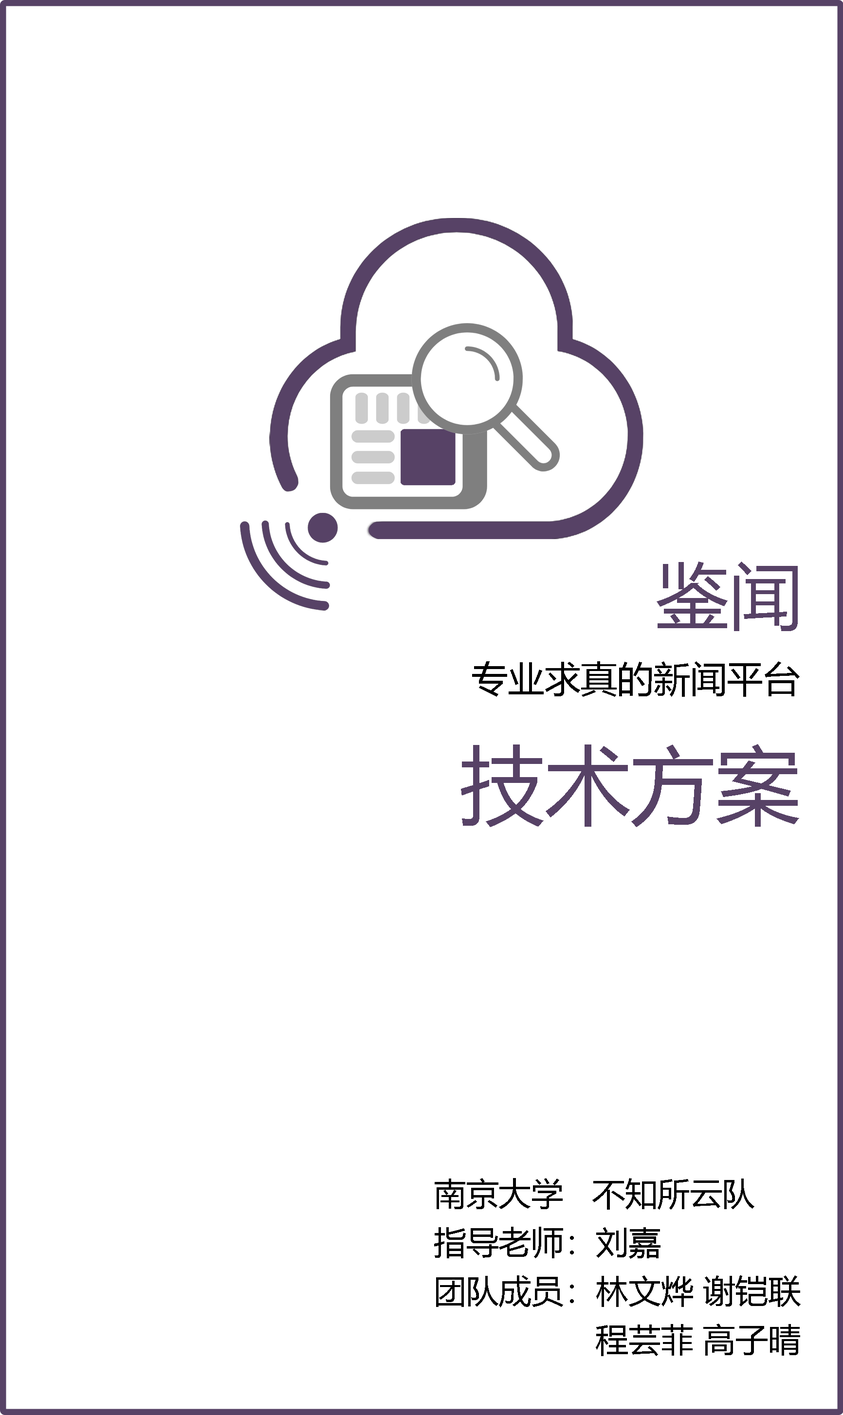
<style>
.page{position:relative;width:843px;height:1415px;background:#ffffff}
.page>*{position:absolute;margin:0}
.t1{font:73px "MicrosoftYaHei";color:#574266}
.t2{font:36.5px "MicrosoftYaHei";color:#000000}
.t3{font:85.1px "MicrosoftYaHei";color:#574266}
.t4{font:32.4px/48.7px "MicrosoftYaHei";color:#000000}
.t5{font:32.4px/48.7px "MicrosoftYaHei";color:#ffffff}
</style>
<div class="page">
<p class="t1" style="left:656px;top:562px;width:141px;height:69px">鉴闻</p>
<p class="t2" style="left:472px;top:661px;width:327px;height:36px">专业求真的新闻平台</p>
<p class="t3" style="left:461px;top:744px;width:338px;height:83px">技术方案</p>
<p class="t4" style="left:434px;top:1178px;width:366px;height:178px">南京大学   不知所云队<br>指导老师：刘嘉<br>团队成员：林文烨 谢铠联 <br><span class="t5">团队成员：</span>程芸菲 高子晴</p>
</div>
